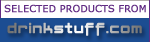
<style>
.page{position:relative;width:150px;height:42px;background:#ffffff}
.page>*{position:absolute;margin:0}
.t1{font:9.5px "Verdana";color:#612b83;font-weight:bold}
.t2{font:12.4px "Lotusflower";letter-spacing:0.1em}
</style>
<div class="page">
<p class="t1" style="left:4px;top:4px;width:142px;height:9px">SELECTED PRODUCTS FROM</p>
<p class="t2" style="left:7px;top:22px;width:135px;height:14px">drinkstuff.com</p>
</div>
